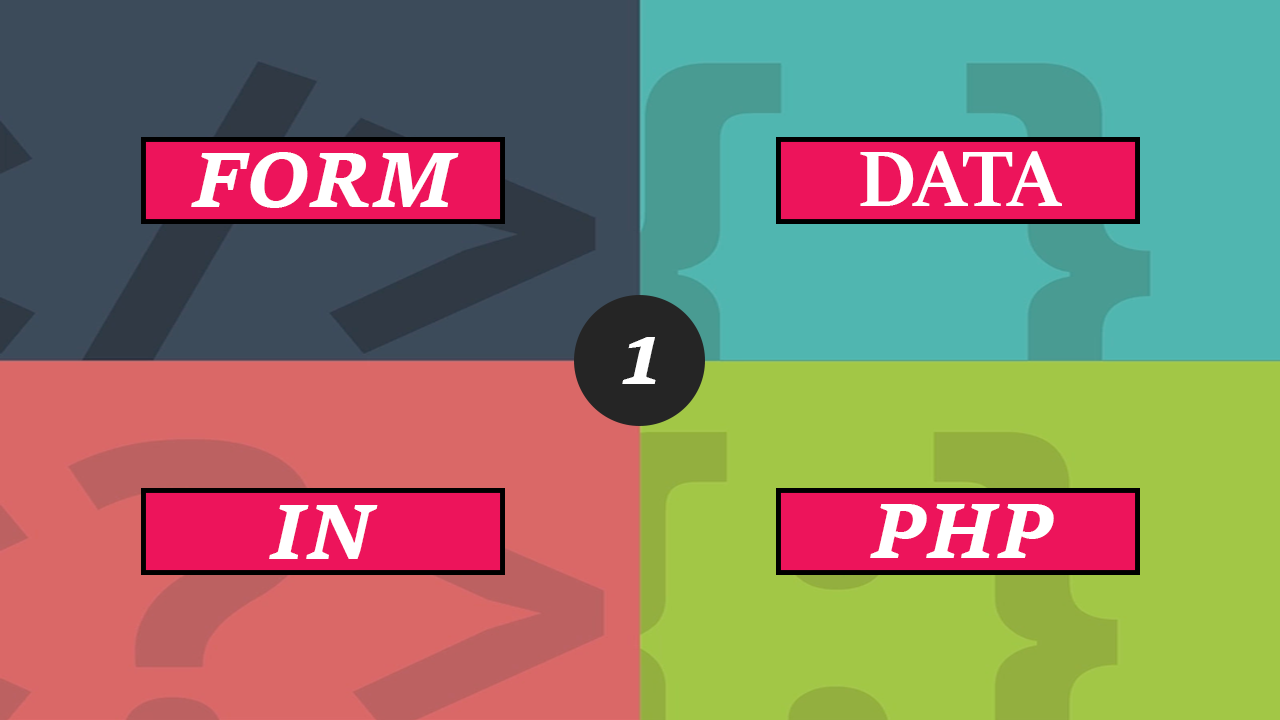
<style>
.page{position:relative;width:1280px;height:720px}
.page>*{position:absolute;margin:0}
.t1{font:82px "SitkaSmall-BoldItalic";letter-spacing:0.01em;color:#ffffff}
.t2{font:88px "SitkaBanner-Bold";letter-spacing:0.01em;color:#ffffff}
</style>
<div class="page">
<p class="t1" style="left:191px;top:152px;width:268px;height:56px">FORM</p>
<p class="t2" style="left:860px;top:151px;width:202px;height:55px">DATA</p>
<p class="t1" style="left:622px;top:337px;width:34px;height:47px">1</p>
<p class="t1" style="left:269px;top:505px;width:109px;height:54px">IN</p>
<p class="t1" style="left:870px;top:504px;width:184px;height:54px">PHP</p>
</div>
